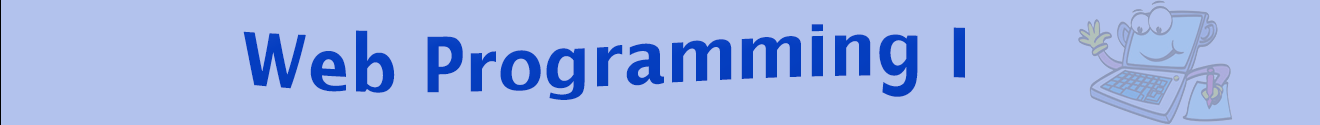
<style>
.page{position:relative;width:1320px;height:125px;background:#b2c2ed}
.page>*{position:absolute;margin:0}
.t1{font:72px "LucidaSans-Demi";color:#053ec1}
</style>
<div class="page">
<p class="t1" style="left:243px;top:24px;width:722px;height:76px">Web Programming I</p>
</div>
